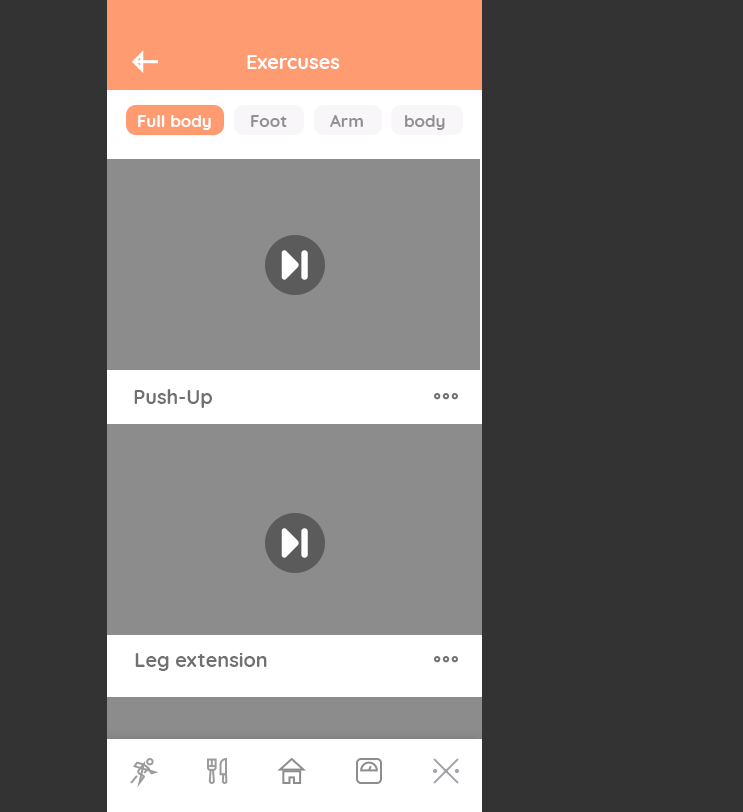
<style>
.page{position:relative;width:743px;height:812px;background:#333333}
.page>*{position:absolute;margin:0}
.t1{font:20px "Quicksand-Bold";color:#ffffff}
.t2{font:17px "Quicksand-Bold";color:#ffffff}
.t3{font:17px "Quicksand-Bold";color:#919191}
.t4{font:20px "Quicksand-Bold";color:#707070}
</style>
<div class="page">
<p class="t1" style="left:247px;top:55px;width:93px;height:14px">Exercuses</p>
<p class="t2" style="left:138px;top:115px;width:73px;height:15px">Full body</p>
<p class="t3" style="left:251px;top:115px;width:36px;height:12px">Foot</p>
<p class="t3" style="left:330px;top:115px;width:33px;height:12px">Arm</p>
<p class="t3" style="left:405px;top:115px;width:40px;height:15px">body</p>
<p class="t4" style="left:134px;top:389px;width:78px;height:19px">Push-Up</p>
<p class="t4" style="left:135px;top:653px;width:132px;height:18px">Leg extension</p>
</div>
